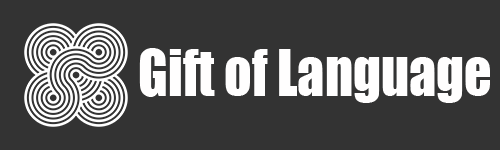
<style>
.page{position:relative;width:500px;height:150px;background:#333333}
.page>*{position:absolute;margin:0}
.t1{font:60px "Impact";color:#fffefe;scale:0.9 1}
</style>
<div class="page">
<p class="t1" style="left:139px;top:48px;width:351px;height:55px">Gift of Language</p>
</div>
